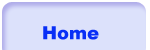
<style>
.page{position:relative;width:150px;height:50px;background:#dce1fb}
.page>*{position:absolute;margin:0}
.t1{font:18px "Arial-Black";color:#092ff6}
.t2{font:20px "Arial-Black";color:#092ff6}
</style>
<div class="page">
<p class="t1" style="left:43px;top:26px;width:56px;height:14px"><span class="t2"><br>      </span>Home</p>
</div>
